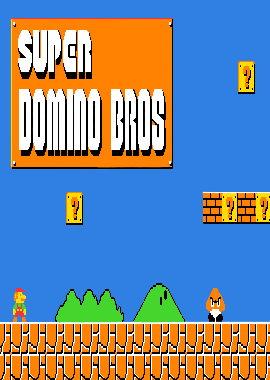
<style>
.page{position:relative;width:270px;height:380px;background:#307fe2}
.page>*{position:absolute;margin:0}
.t1{font:21.3px "SuperPlumberBrothers";letter-spacing:0.01em;color:#ff8200}
.t2{font:60.4px "SuperPlumberBrothers";letter-spacing:0.025em;color:#ffffff;text-transform:uppercase;scale:0.54 1}
</style>
<div class="page">
<p class="t1" style="left:243px;top:66px;width:7px;height:21px">?</p>
<p class="t2" style="left:19px;top:89px;width:145px;height:61px">Domino BROS</p>
<p class="t1" style="left:71px;top:197px;width:7px;height:21px">?</p>
<p class="t1" style="left:226px;top:197px;width:7px;height:21px">?</p>
<p class="t1" style="left:260px;top:197px;width:7px;height:21px">?</p>
</div>
